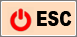
<style>
.page{position:relative;width:77px;height:37px;background:#ffdbbc}
.page>*{position:absolute;margin:0}
.t1{font:21.4px "Arial-Black";color:#020000;scale:0.75 1}
</style>
<div class="page">
<p class="t1" style="left:37px;top:11px;width:35px;height:15px">ESC</p>
</div>
